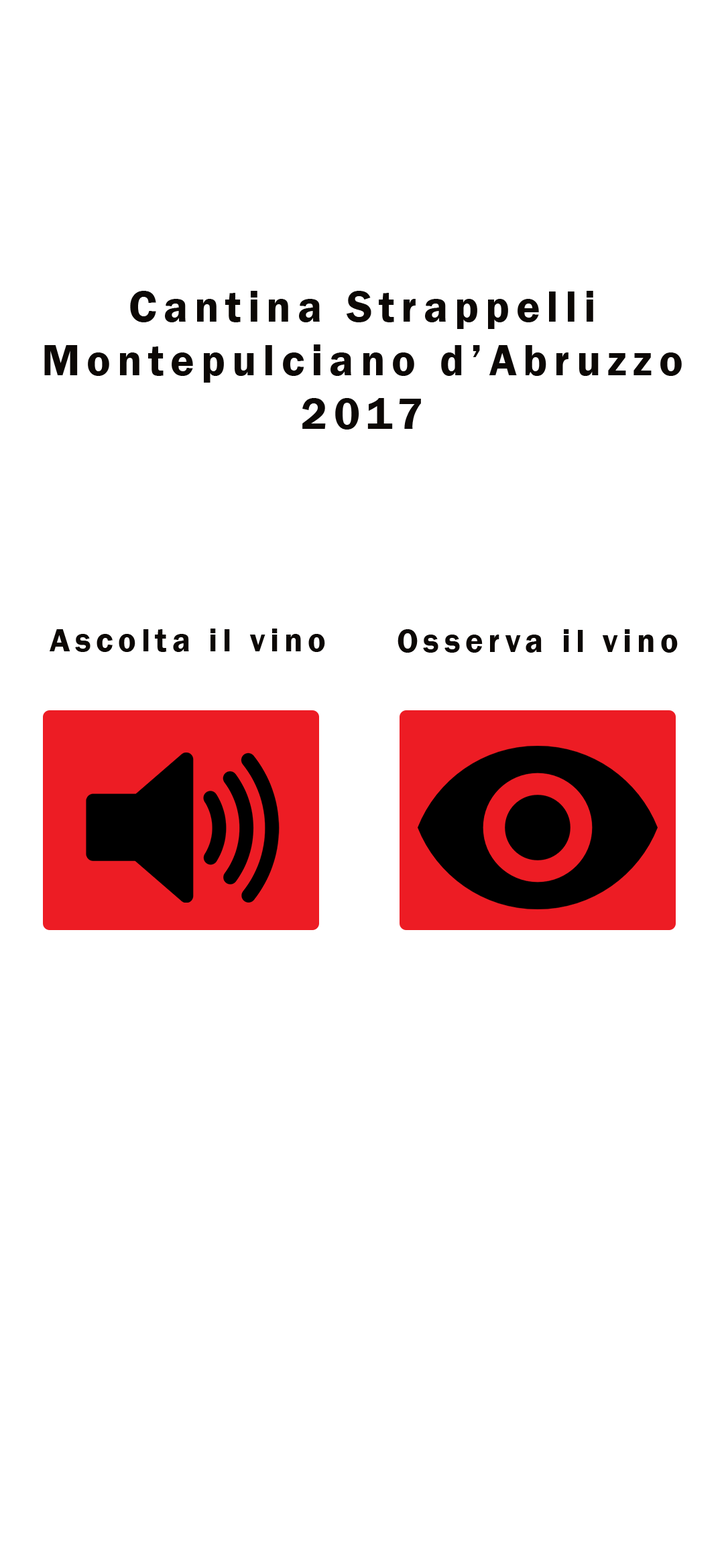
<style>
.page{position:relative;width:724px;height:1568px;background:#ffffff}
.page>*{position:absolute;margin:0}
.t1{font:44.7px "FranklinGothic-Demi";letter-spacing:0.15em;color:#0c0805}
.t2{font:33.5px "FranklinGothic-Demi";letter-spacing:0.15em;color:#0c0805}
</style>
<div class="page">
<p class="t1" style="left:44px;top:291px;width:637px;height:139px;text-align:center">Cantina Strappelli <br>Montepulciano d’Abruzzo<br>2017</p>
<p class="t2" style="left:50px;top:629px;width:275px;height:23px">Ascolta il vino</p>
<p class="t2" style="left:397px;top:629px;width:280px;height:24px">Osserva il vino</p>
</div>
